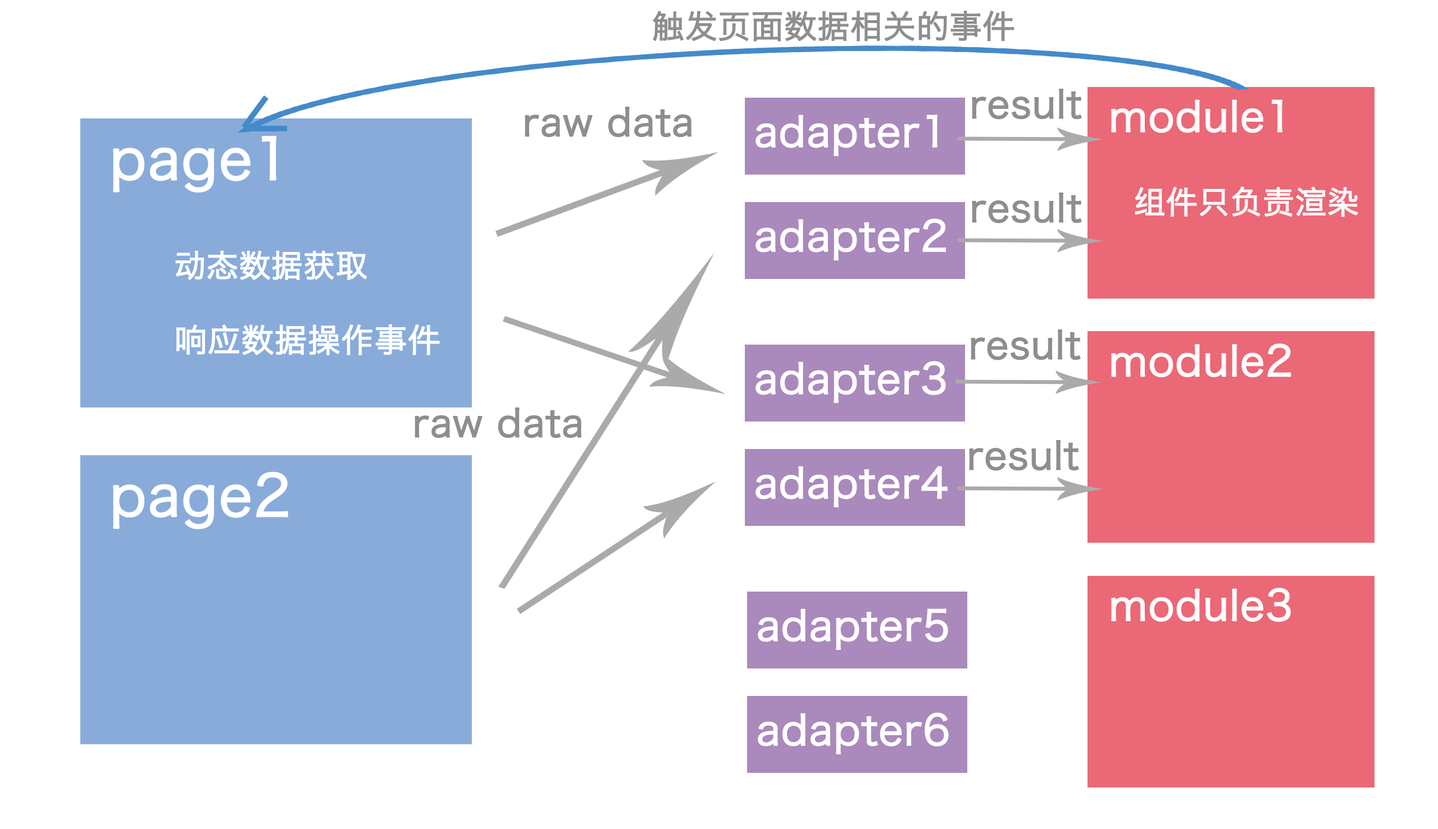
<style>
.page{position:relative;width:1438px;height:829px;background:#ffffff}
.page>*{position:absolute;margin:0}
.t1{font:32.2px "HiraginoSansGB-W3";color:#8e8e8e;font-weight:bold}
.t2{font:38.1px "HiraginoSansGB-W3";color:#8e8e8e;font-weight:bold}
.t3{font:41.2px "HiraginoSansGB-W3";color:#ffffff;font-weight:bold}
.t4{font:56.2px "HiraginoSansGB-W3";color:#ffffff;font-weight:bold}
.t5{font:31.4px "HiraginoSansGB-W3";color:#ffffff;font-weight:bold}
.t6{font:32.5px "HiraginoSansGB-W3";color:#ffffff;font-weight:bold}
</style>
<div class="page">
<p class="t1" style="left:653px;top:11px;width:361px;height:31px">触发页面数据相关的事件</p>
<p class="t2" style="left:972px;top:89px;width:110px;height:31px">result</p>
<p class="t3" style="left:1111px;top:99px;width:171px;height:34px">module1</p>
<p class="t2" style="left:525px;top:107px;width:167px;height:31px">raw data</p>
<p class="t3" style="left:755px;top:115px;width:182px;height:41px">adapter1</p>
<p class="t4" style="left:113px;top:135px;width:164px;height:58px">page1</p>
<p class="t2" style="left:972px;top:193px;width:110px;height:31px">result</p>
<p class="t5" style="left:1134px;top:186px;width:224px;height:31px">组件只负责渲染</p>
<p class="t3" style="left:755px;top:218px;width:191px;height:43px">adapter2</p>
<p class="t5" style="left:175px;top:250px;width:192px;height:30px">动态数据获取</p>
<p class="t6" style="left:176px;top:324px;width:264px;height:31px">响应数据操作事件</p>
<p class="t2" style="left:970px;top:330px;width:110px;height:31px">result</p>
<p class="t3" style="left:1111px;top:344px;width:180px;height:34px">module2</p>
<p class="t3" style="left:755px;top:361px;width:191px;height:42px">adapter3</p>
<p class="t2" style="left:414px;top:408px;width:168px;height:31px">raw data</p>
<p class="t2" style="left:969px;top:440px;width:110px;height:31px">result</p>
<p class="t4" style="left:113px;top:472px;width:175px;height:58px">page2</p>
<p class="t3" style="left:755px;top:466px;width:192px;height:42px">adapter4</p>
<p class="t3" style="left:1111px;top:588px;width:179px;height:34px">module3</p>
<p class="t3" style="left:758px;top:609px;width:190px;height:41px">adapter5</p>
<p class="t3" style="left:758px;top:713px;width:190px;height:42px">adapter6</p>
</div>
